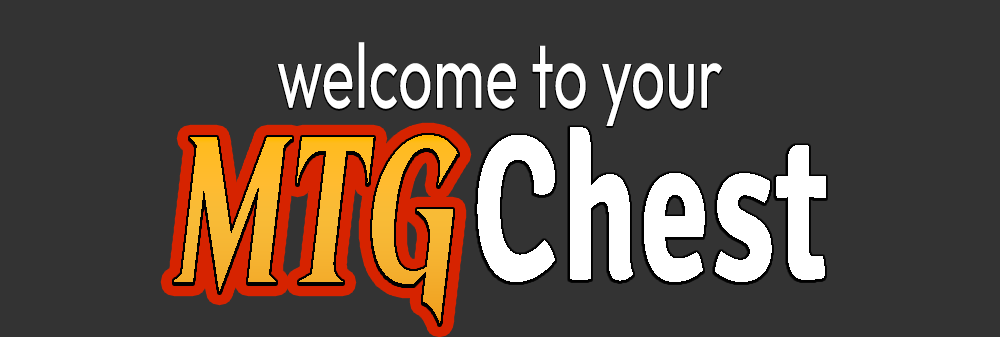
<style>
.page{position:relative;width:1000px;height:337px;background:#333333}
.page>*{position:absolute;margin:0}
.t1{font:91.9px "Outfit-Regular";letter-spacing:0.01em;color:#ffffff;font-style:italic;scale:0.66 1}
.t2{font:206.7px "Beleren2016-Bold";letter-spacing:0.01em;color:#f8bb30;font-style:italic;scale:0.66 1}
.t3{font:206.7px "SignikaNegative-Bold";letter-spacing:0.01em;color:#ffffff;font-style:italic;scale:0.69 1}
</style>
<div class="page">
<p class="t1" style="left:277px;top:42px;width:445px;height:84px">welcome to your</p>
<p class="t2" style="left:174px;top:135px;width:284px;height:188px">MTG</p>
<p class="t3" style="left:477px;top:127px;width:349px;height:155px">Chest</p>
</div>
